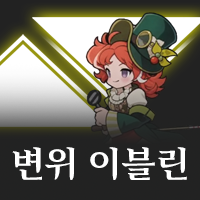
<style>
.page{position:relative;width:200px;height:200px;background:#222222}
.page>*{position:absolute;margin:0}
.t1{font:36px "Arita-buri-Bold_OTF";color:#ffffff}
</style>
<div class="page">
<p class="t1" style="left:12px;top:147px;width:175px;height:33px">변위 이블린</p>
</div>
